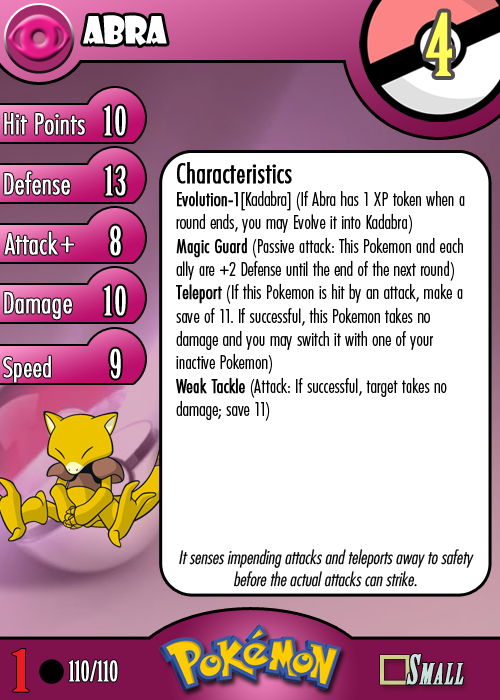
<style>
.page{position:relative;width:500px;height:700px;background:#ffffff}
.page>*{position:absolute;margin:0}
.t1{font:36.7px "ShowcardGothic-Reg";letter-spacing:-0.025em;color:#ffffff;scale:0.91 1}
.t2{font:83.3px "BirchStd";letter-spacing:0.025em;color:#fffd59;font-weight:bold}
.t3{font:27.8px "Futura-CondensedLight";color:#ffffff;font-weight:bold}
.t4{font:38.9px "BirchStd";letter-spacing:0.035em;color:#ffffff;font-weight:bold}
.t5{font:19.4px "FuturaCondensedBQ-Light";color:#010101}
.t6{font:27.8px "FuturaCondensedBQ-Light";color:#010101;font-weight:bold}
.t7{font:19.4px "FuturaCondensedBQ-Light";color:#010101;font-weight:bold}
.t8{font:30.6px "Futura-CondensedLight";color:#ffffff;font-weight:bold}
.t9{font:27.8px "FuturaCondensedBQ-Light";color:#ffffff;font-weight:bold}
.t10{font:18.1px "Futura-CondensedLight";color:#010101;font-style:italic}
.t11{font:55.6px "BirchStd";color:#ed1c24;font-weight:bold;scale:1.5 1}
.t12{font:27.8px "BirchStd";color:#ffffff;font-weight:bold}
</style>
<div class="page">
<p class="t1" style="left:83px;top:15px;width:84px;height:31px">abra</p>
<p class="t2" style="left:426px;top:12px;width:26px;height:64px">4</p>
<p class="t3" style="left:4px;top:113px;width:81px;height:22px">Hit Points</p>
<p class="t4" style="left:104px;top:105px;width:22px;height:31px">10</p>
<p class="t3" style="left:4px;top:171px;width:66px;height:24px">Defense</p>
<p class="t4" style="left:105px;top:165px;width:21px;height:31px">13</p>
<p class="t5" style="left:176px;top:162px;width:289px;height:259px"><span class="t6">Characteristics<br></span><span class="t7">Evolution-1</span>[Kadabra] (If Abra has 1 XP token when a round ends, you may Evolve it into Kadabra)<br><span class="t7">Magic Guard</span> (Passive attack: This Pokemon and each ally are +2 Defense until the end of the next round)<br><span class="t7">Teleport</span> (If this Pokemon is hit by an attack, make a save of 11. If successful, this Pokemon takes no damage and you may switch it with one of your inactive Pokemon)<br><span class="t7">Weak Tackle</span> (Attack: If successful, target takes no damage; save 11)</p>
<p class="t3" style="left:4px;top:231px;width:54px;height:24px">Attack</p>
<p class="t4" style="left:110px;top:225px;width:11px;height:31px">8</p>
<p class="t8" style="left:60px;top:236px;width:14px;height:17px">+</p>
<p class="t3" style="left:4px;top:292px;width:68px;height:28px">Damage</p>
<p class="t4" style="left:104px;top:285px;width:22px;height:31px">10</p>
<p class="t4" style="left:110px;top:348px;width:11px;height:31px">9</p>
<p class="t9" style="left:3px;top:355px;width:48px;height:28px">Speed</p>
<p class="t10" style="left:179px;top:549px;width:295px;height:38px;text-align:center">It senses impending attacks and teleports away to safety before the actual attacks can strike.</p>
<p class="t11" style="left:12px;top:649px;width:17px;height:43px">1</p>
<p class="t12" style="left:68px;top:660px;width:50px;height:22px">110/110</p>
</div>
